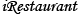
<style>
.page{position:relative;width:80px;height:14px;background:#ffffff}
.page>*{position:absolute;margin:0}
.t1{font:18px "MonotypeCorsiva";color:#000000}
</style>
<div class="page">
<p class="t1" style="left:2px;top:0px;width:76px;height:14px">iRestaurant</p>
</div>
